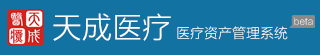
<style>
.page{position:relative;width:320px;height:55px;background:#1273a3}
.page>*{position:absolute;margin:0}
.t1{font:14px "FZLTXHK--GBK1-0";color:#ffffff}
.t2{font:30px "FZLTXHK--GBK1-0";color:#ffffff}
.t3{font:9.3px "FZLTXHK--GBK1-0"}
</style>
<div class="page">
<p class="t1" style="left:53px;top:13px;width:235px;height:28px"><span class="t2">天成医疗</span> 医疗资产管理系统</p>
<p class="t3" style="left:294px;top:17px;width:19px;height:8px">beta</p>
</div>
